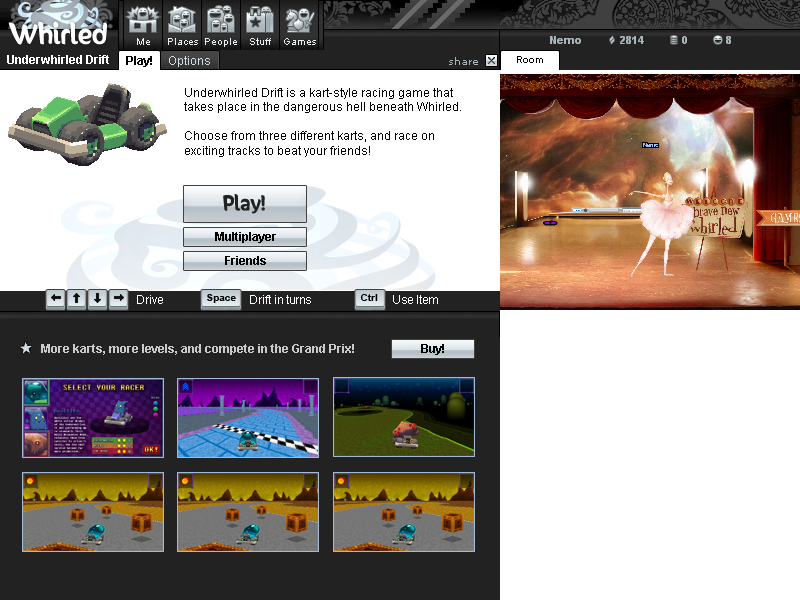
<style>
.page{position:relative;width:800px;height:600px;background:#ffffff}
.page>*{position:absolute;margin:0}
.t1{font:12px "Arial-BoldMT";color:#ffffff}
.t2{font:12px "Arial-BoldMT";color:#010100}
.t3{font:12px "ArialMT";color:#cfdce1}
.t4{font:12px "ArialMT";color:#000000}
.t5{font:18px "SunnySide";color:#222222}
.t6{font:12px "Arial-BoldMT";color:#000000}
.t7{font:10px "Arial-BoldMT";color:#000000}
.t8{font:12px "ArialMT";color:#ffffff}
.t9{font:40px "KonQaBlack";letter-spacing:-0.05em;color:#cfdce1}
.t10{font:12px "Arial-BoldMT";color:#cacaca}
</style>
<div class="page">
<p class="t1" style="left:7px;top:55px;width:102px;height:9px">Underwhirled Drift</p>
<p class="t2" style="left:126px;top:56px;width:26px;height:11px">Play!</p>
<p class="t3" style="left:169px;top:56px;width:41px;height:11px">Options</p>
<p class="t4" style="left:184px;top:88px;width:277px;height:69px">Underwhirled Drift is a kart-style racing game that<br>takes place in the dangerous hell beneath Whirled.<br><br>Choose from three different karts, and race on <br>exciting tracks to beat your friends!</p>
<p class="t5" style="left:223px;top:194px;width:42px;height:20px">Play!</p>
<p class="t6" style="left:215px;top:232px;width:61px;height:11px">Multiplayer</p>
<p class="t6" style="left:225px;top:256px;width:41px;height:9px">Friends</p>
<p class="t7" style="left:207px;top:294px;width:29px;height:9px">Space</p>
<p class="t7" style="left:360px;top:294px;width:18px;height:7px">Ctrl</p>
<p class="t8" style="left:137px;top:295px;width:26px;height:9px">Drive</p>
<p class="t8" style="left:250px;top:295px;width:61px;height:9px">Drift in turns</p>
<p class="t8" style="left:393px;top:295px;width:45px;height:9px">Use Item</p>
<p class="t9" style="left:20px;top:342px;width:12px;height:12px;rotate:-5deg">*</p>
<p class="t10" style="left:41px;top:344px;width:313px;height:11px">More karts, more levels, and compete in the Grand Prix!</p>
<p class="t6" style="left:421px;top:344px;width:23px;height:11px">Buy!</p>
</div>
